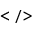
<style>
.page{position:relative;width:32px;height:32px;background:#ffffff}
.page>*{position:absolute;margin:0}
.t1{font:14px "Verdana";color:#000000}
</style>
<div class="page">
<p class="t1" style="left:0px;top:10px;width:32px;height:13px">&lt; /&gt;</p>
</div>
